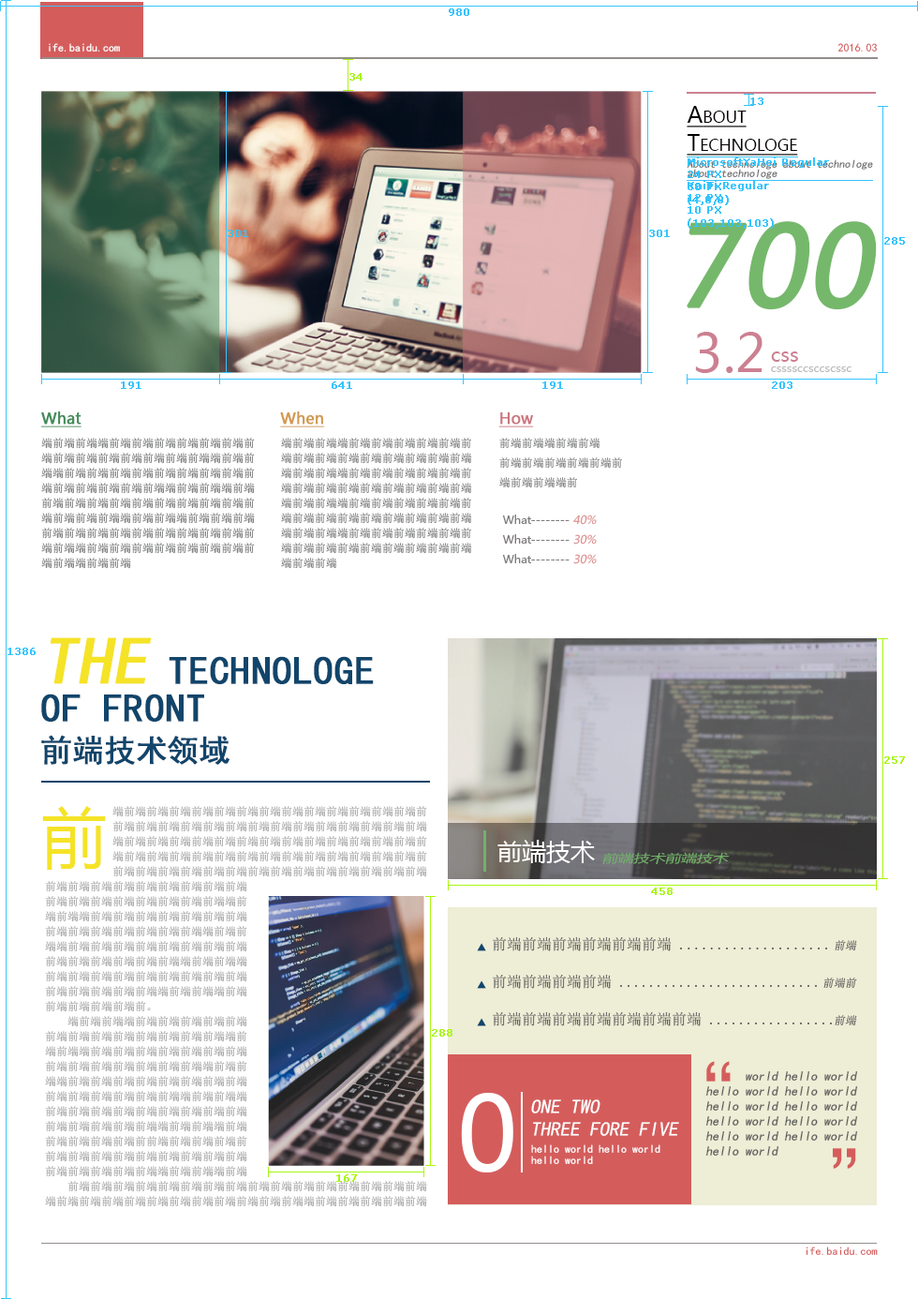
<style>
.page{position:relative;width:918px;height:1299px;background:#ffffff}
.page>*{position:absolute;margin:0}
.t1{font:10.3px "Verdana";color:#36c4ff;font-weight:bold}
.t2{font:11.2px "SimHei";color:#ffffff}
.t3{font:11.2px "SimHei";color:#d45d5c}
.t4{font:10.3px "Verdana";color:#a8f611;font-weight:bold}
.t5{font:22.5px/28.1px "MicrosoftYaHei";color:#040000;font-variant:small-caps;text-decoration:underline}
.t6{font:11.2px/9.4px "KaiTi";color:#676767;font-style:italic}
.t7{font:108.7px "MicrosoftYaHei";color:#75b86b;font-weight:bold;font-style:italic}
.t8{font:51.5px "MicrosoftYaHei";color:#cc8091}
.t9{font:19.7px "MicrosoftYaHei";color:#cc8091}
.t10{font:11.2px "MicrosoftYaHei";color:#bcbbba}
.t11{font:15px "MicrosoftYaHei";color:#418c59;font-weight:bold;text-decoration:underline}
.t12{font:15px "MicrosoftYaHei";color:#d2994f;font-weight:bold;text-decoration:underline}
.t13{font:15px "MicrosoftYaHei";color:#cc7680;font-weight:bold;text-decoration:underline}
.t14{font:11.2px/15px "SimSun";color:#767777}
.t15{font:11.2px/19.7px "SimSun";color:#767777}
.t16{font:11.2px/19.7px "MicrosoftYaHei";color:#7e7b7a}
.t17{font:11.2px/19.7px "MicrosoftYaHei";color:#7e7b7a;font-style:italic}
.t18{font:39.4px/37.5px "SimHei";color:#11456b;font-weight:bold}
.t19{font:67.5px/36.9px "SimHei";color:#f5e327;font-weight:bold;font-style:italic}
.t20{font:30.9px "SimHei";color:#11456b;font-weight:bold}
.t21{font:65.6px "MicrosoftYaHei";color:#f5e327}
.t22{font:24.4px "MicrosoftYaHei";color:#ffffff}
.t23{font:11.2px "MicrosoftYaHei";color:#72b16a;font-style:italic;scale:1.4 1}
.t24{font:15px/18.7px "SimSun";color:#5a5b5b}
.t25{font:11.2px/18.7px "SimSun";font-style:italic}
.t26{font:67.5px "SimHei";color:#d45d5c}
.t27{font:13.1px/15px "SimHei";color:#5a5b5b;font-style:italic}
.t28{font:103.1px "MicrosoftYaHei";color:#ffffff}
.t29{font:19.7px/22.5px "SimHei";color:#ffffff;font-style:italic}
.t30{font:11.2px/5.6px "SimHei";color:#ffffff}
</style>
<div class="page">
<p class="t1" style="left:449px;top:8px;width:20px;height:8px">980</p>
<p class="t2" style="left:49px;top:43px;width:71px;height:9px">ife.baidu.com</p>
<p class="t3" style="left:838px;top:43px;width:39px;height:9px">2016.03</p>
<p class="t4" style="left:349px;top:73px;width:14px;height:8px">34</p>
<p class="t1" style="left:751px;top:97px;width:13px;height:8px">13</p>
<p class="t5" style="left:687px;top:106px;width:111px;height:50px">About<br>Technologe</p>
<p class="t6" style="left:687px;top:159px;width:186px;height:20px">About technologe about technologe <br>about technologe</p>
<p class="t1" style="left:688px;top:157px;width:141px;height:48px">MicrosoftYaHei Regular<br>24 PX<br>30 PX<br>(4,0,0)</p>
<p class="t1" style="left:688px;top:181px;width:86px;height:48px">KaiTi Regular<br>12 PX<br>10 PX<br>(103,103,103)</p>
<p class="t7" style="left:687px;top:221px;width:190px;height:89px">700</p>
<p class="t1" style="left:228px;top:230px;width:20px;height:7px">301</p>
<p class="t1" style="left:649px;top:230px;width:21px;height:7px">301</p>
<p class="t1" style="left:649px;top:230px;width:21px;height:7px">301</p>
<p class="t1" style="left:884px;top:237px;width:21px;height:8px">285</p>
<p class="t8" style="left:695px;top:332px;width:68px;height:41px">3.2</p>
<p class="t9" style="left:771px;top:351px;width:27px;height:11px">css</p>
<p class="t10" style="left:771px;top:366px;width:81px;height:6px">cssssccsccscssc</p>
<p class="t1" style="left:121px;top:381px;width:20px;height:8px">191</p>
<p class="t1" style="left:332px;top:381px;width:20px;height:8px">641</p>
<p class="t1" style="left:543px;top:381px;width:20px;height:8px">191</p>
<p class="t1" style="left:772px;top:381px;width:21px;height:8px">203</p>
<p class="t11" style="left:41px;top:411px;width:41px;height:16px">What</p>
<p class="t12" style="left:280px;top:411px;width:45px;height:16px">When</p>
<p class="t13" style="left:498px;top:412px;width:36px;height:15px">How</p>
<p class="t14" style="left:41px;top:438px;width:214px;height:131px">端前端前端端前端前端前端前端前端前端前<br>端前端前端前端前端前端前端前端端前端前<br>端端前端前端前端前端前端前端前端前端前<br>端前端前端前端前端前端端前端前端端前端<br>前端前端前端前端前端前端前端前端前端前<br>端前端前端前端端前端前端端前端前端前端<br>前端前端前端前端前端前端前端前端前端前<br>端前端端前端前端前端前端前端前端前端前<br>端前端端前端前端</p>
<p class="t14" style="left:281px;top:438px;width:191px;height:131px">端前端前端端前端前端前端前端前端前<br>端前端前端前端前端前端前端前端前端<br>端前端前端端前端前端前端前端前端前<br>端前端前端前端前端前端前端前端前端<br>端前端前端端前端前端前端前端前端前<br>端前端前端前端前端前端前端前端前端<br>端前端前端端前端前端前端前端前端前<br>端前端前端前端前端前端前端前端前端<br>端前端前端</p>
<p class="t15" style="left:499px;top:438px;width:123px;height:50px">前端前端端前端前端<br>前端前端前端前端前端前<br>端前端前端端前</p>
<p class="t16" style="left:502px;top:514px;width:95px;height:50px">What-------- <span class="t17">40%<br></span>What-------- <span class="t17">30%<br></span>What-------- <span class="t17">30%</span></p>
<p class="t18" style="left:41px;top:637px;width:333px;height:84px"><span class="t19">THE </span>TECHNOLOGE<br>OF FRONT</p>
<p class="t1" style="left:7px;top:647px;width:29px;height:8px">1386</p>
<p class="t20" style="left:41px;top:735px;width:189px;height:30px">前端技术领域</p>
<p class="t4" style="left:884px;top:756px;width:21px;height:8px">257</p>
<p class="t21" style="left:42px;top:806px;width:64px;height:64px">前</p>
<p class="t22" style="left:498px;top:840px;width:97px;height:23px">前端技术</p>
<p class="t23" style="left:602px;top:852px;width:128px;height:12px">前端技术前端技术</p>
<p class="t4" style="left:651px;top:887px;width:22px;height:8px">458</p>
<p class="t24" style="left:493px;top:936px;width:339px;height:90px">前端前端前端前端前端前端 ....................<br><br>前端前端前端前端 ...........................<br><br>前端前端前端前端前端前端前端 .................</p>
<p class="t25" style="left:824px;top:940px;width:33px;height:86px;text-align:right">前端<br><br>前端前<br><br>前端</p>
<p class="t4" style="left:432px;top:1029px;width:21px;height:7px">288</p>
<p class="t26" style="left:706px;top:1061px;width:10px;height:20px">‘</p>
<p class="t26" style="left:721px;top:1061px;width:10px;height:20px">‘</p>
<p class="t27" style="left:706px;top:1071px;width:152px;height:84px">world hello world<br>hello world hello world<br>hello world hello world<br>hello world hello world<br>hello world hello world<br>hello world</p>
<p class="t28" style="left:461px;top:1092px;width:52px;height:80px">0</p>
<p class="t29" style="left:531px;top:1099px;width:148px;height:37px">ONE TWO <br>THREE FORE FIVE</p>
<p class="t30" style="left:531px;top:1144px;width:130px;height:20px">hello world hello world <br><br>hello world</p>
<p class="t26" style="left:833px;top:1148px;width:9px;height:20px">’</p>
<p class="t26" style="left:847px;top:1148px;width:9px;height:20px">’</p>
<p class="t4" style="left:336px;top:1174px;width:21px;height:8px">167</p>
<p class="t3" style="left:806px;top:1246px;width:72px;height:9px">ife.baidu.com</p>
</div>
